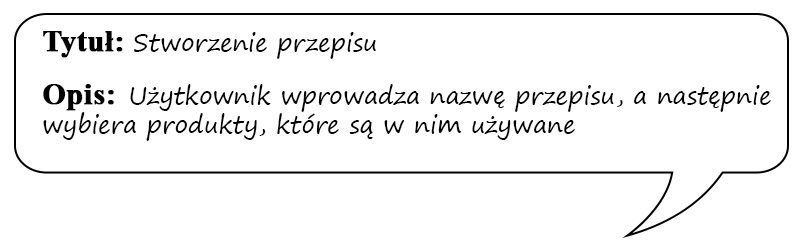
<style>
.page{position:relative;width:800px;height:252px;background:#ffffff}
.page>*{position:absolute;margin:0}
.t1{font:24px "SegoePrint";color:#000000}
.t2{font:30px "TimesNewRomanPS-BoldMT";color:#000000;font-weight:bold}
</style>
<div class="page">
<p class="t1" style="left:43px;top:31px;width:728px;height:110px"><span class="t2">Tytuł: </span>Stworzenie przepisu<br><br><span class="t2">Opis:  </span>Użytkownik wprowadza nazwę przepisu, a następnie wybiera produkty, które są w nim używane</p>
</div>
